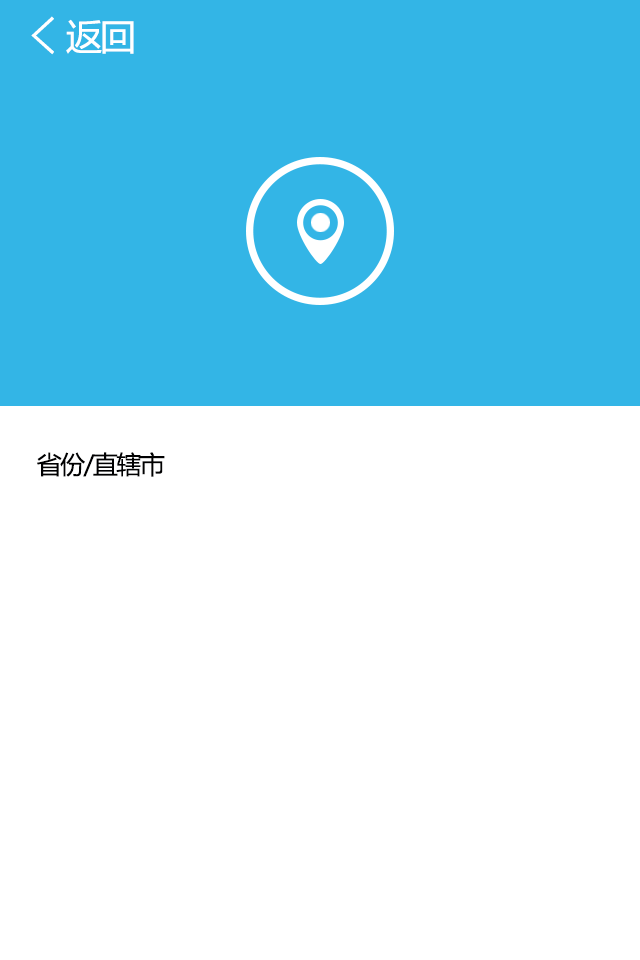
<style>
.page{position:relative;width:640px;height:960px;background:#ffffff}
.page>*{position:absolute;margin:0}
.t1{font:52.2px "SimHei";letter-spacing:-0.06em;color:#ffffff}
.t2{font:36px "MicrosoftYaHei";letter-spacing:-0.06em;color:#ffffff}
.t3{font:25px "MicrosoftYaHei";letter-spacing:-0.06em;color:#000001}
</style>
<div class="page">
<p class="t1" style="left:31px;top:16px;width:23px;height:39px">&lt;</p>
<p class="t2" style="left:66px;top:19px;width:68px;height:35px">返回</p>
<p class="t3" style="left:37px;top:452px;width:128px;height:25px">省份/直辖市</p>
</div>
